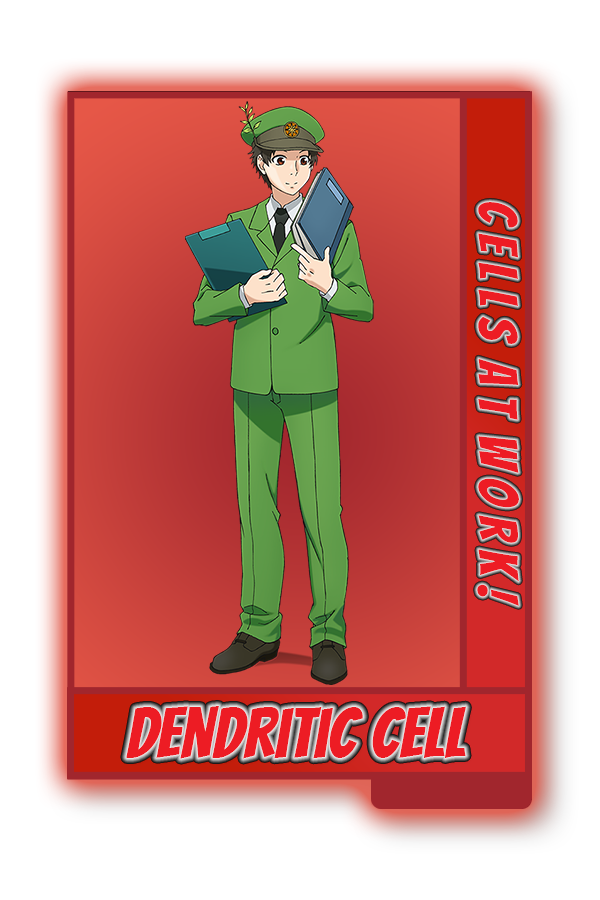
<style>
.page{position:relative;width:600px;height:900px;background:#ffffff}
.page>*{position:absolute;margin:0}
.t1{font:54px "Bangers-Regular";color:#ed1c24}
.t2{font:70px "Bangers-Regular";color:#ed1c24}
</style>
<div class="page">
<p class="t1" style="left:477px;top:202px;width:42px;height:404px;rotate:90deg">C e l l S  A t  W o r k !</p>
<p class="t2" style="left:126px;top:706px;width:340px;height:53px">Dendritic cell</p>
</div>
